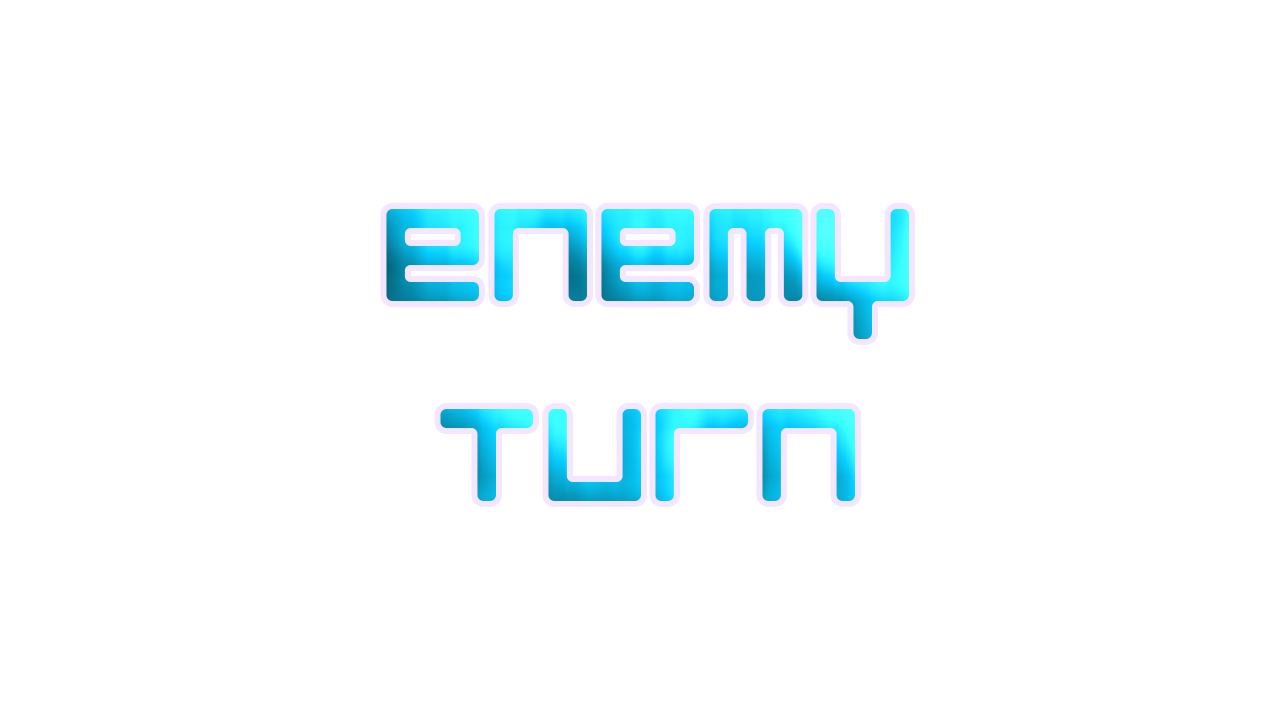
<style>
.page{position:relative;width:1280px;height:720px;background:#ffffff}
.page>*{position:absolute;margin:0}
.t1{font:166.7px "LuggageRoundRegular"}
</style>
<div class="page">
<p class="t1" style="left:386px;top:209px;width:523px;height:292px;text-align:center">enemy<br>Turn</p>
</div>
